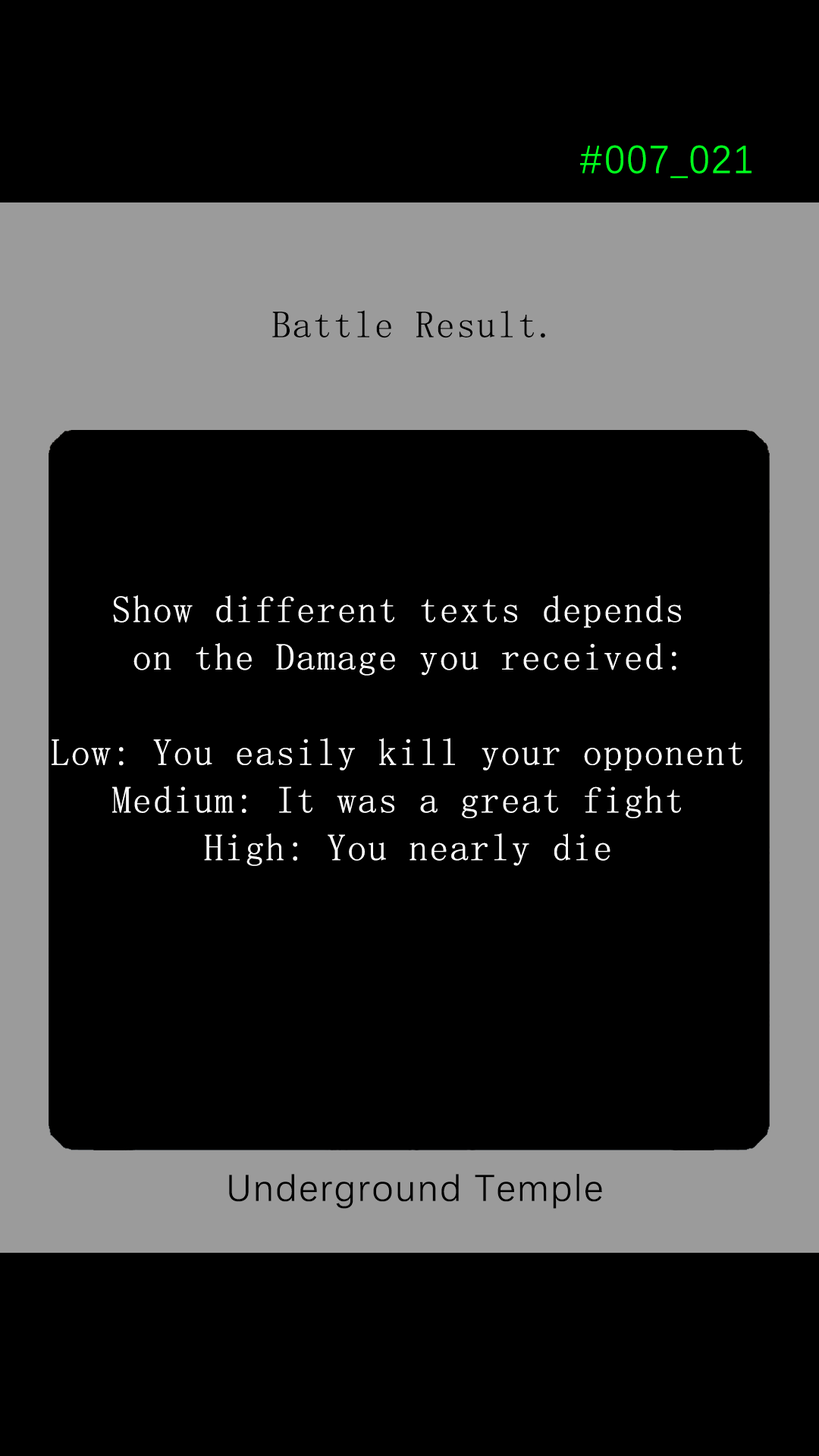
<style>
.page{position:relative;width:819px;height:1456px;background:#000000}
.page>*{position:absolute;margin:0}
.t1{font:39.2px "DengXian-Regular";letter-spacing:0.04em;color:#00ff1e}
.t2{font:37.9px "SimSun";letter-spacing:0.04em;color:#000000}
.t3{font:37.9px/47.6px "SimSun";letter-spacing:0.04em;color:#ffffff}
.t4{font:37.9px "DengXian-Regular";letter-spacing:0.04em;color:#000000}
</style>
<div class="page">
<p class="t1" style="left:580px;top:145px;width:171px;height:33px">#007_021</p>
<p class="t2" style="left:272px;top:310px;width:273px;height:28px">Battle Result.</p>
<p class="t3" style="left:52px;top:595px;width:690px;height:271px;text-align:center">Show different texts depends <br>on the Damage you received:<br><br>Low: You easily kill your opponent <br>Medium: It was a great fight <br>High: You nearly die</p>
<p class="t4" style="left:229px;top:1174px;width:373px;height:35px">Underground Temple</p>
</div>
